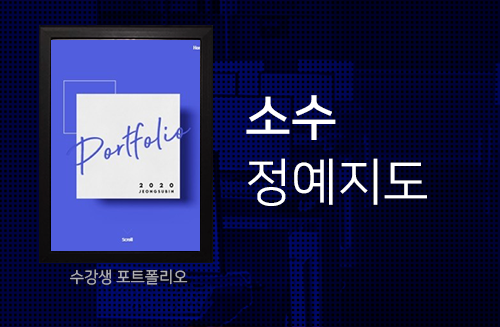
<style>
.page{position:relative;width:500px;height:327px}
.page>*{position:absolute;margin:0}
.t1{font:50.3px/64.8px "NanumSquareR";color:#ffffff}
.t2{font:50.3px/64.8px "NanumSquareB";color:#ffffff}
.t3{font:15.6px "NanumSquareR";color:#b2b2b6}
</style>
<div class="page">
<p class="t1" style="left:246px;top:95px;width:181px;height:111px"><span class="t2">소수<br></span>정예지도</p>
<p class="t3" style="left:70px;top:269px;width:118px;height:16px">수강생 포트폴리오</p>
</div>
